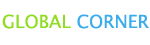
<style>
.page{position:relative;width:150px;height:45px;background:#ffffff}
.page>*{position:absolute;margin:0}
.t1{font:18px "LucidaSans";color:#90dc23}
.t2{font:18px "LucidaSans";color:#3aaceb}
</style>
<div class="page">
<p class="t1" style="left:2px;top:14px;width:147px;height:15px">GLOBAL <span class="t2">CORNER</span></p>
</div>
